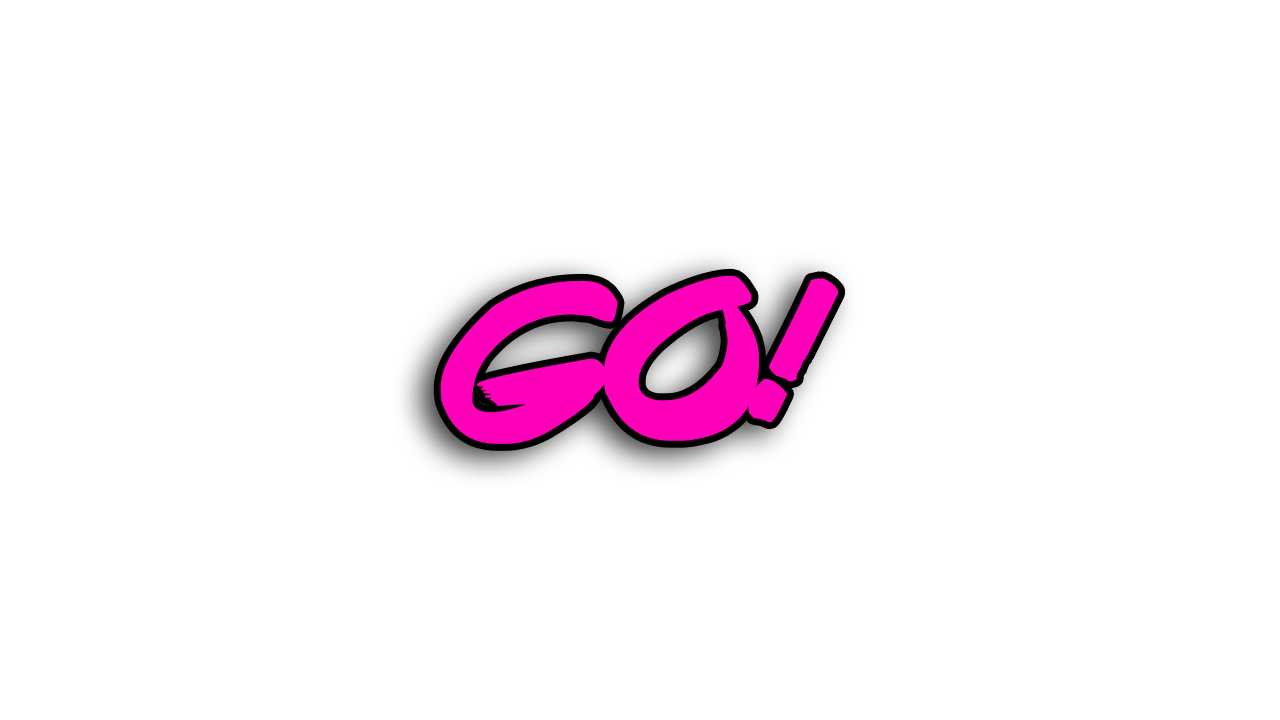
<style>
.page{position:relative;width:1280px;height:720px;background:#ffffff}
.page>*{position:absolute;margin:0}
.t1{font:200px "lazer84";color:#ff00ba}
</style>
<div class="page">
<p class="t1" style="left:440px;top:275px;width:399px;height:169px">GO!</p>
</div>
